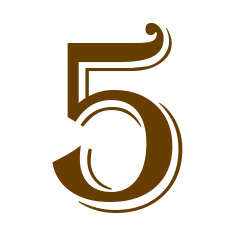
<style>
.page{position:relative;width:240px;height:240px;background:#ffffff}
.page>*{position:absolute;margin:0}
.t1{font:250px "Algerian";color:#683e00}
</style>
<div class="page">
<p class="t1" style="left:52px;top:23px;width:131px;height:190px">5</p>
</div>
